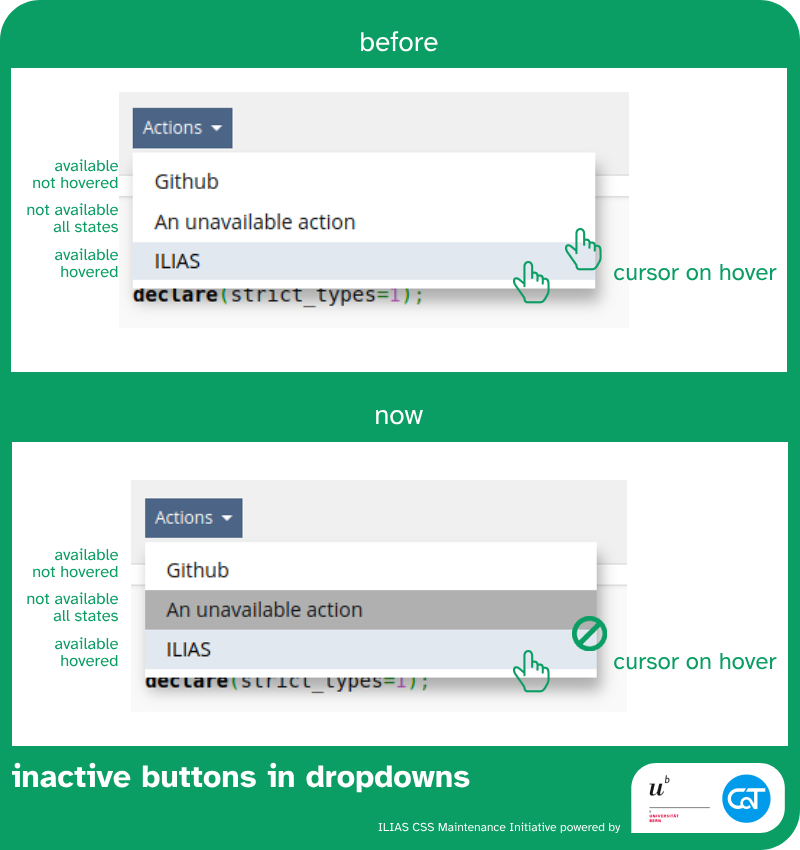
<style>
.page{position:relative;width:800px;height:850px;background:#ffffff}
.page>*{position:absolute;margin:0}
.t1{font:28px "AtkinsonHyperlegible-Regular";color:#ffffff}
.t2{font:16.6px "AtkinsonHyperlegible-Regular";color:#0a9d64}
.t3{font:24px "AtkinsonHyperlegible-Regular";color:#0a9d64}
.t4{font:32.1px "AtkinsonHyperlegible-Bold";color:#ffffff}
.t5{font:12px "AtkinsonHyperlegible-Regular";color:#ffffff}
</style>
<div class="page">
<p class="t1" style="left:361px;top:31px;width:77px;height:21px">before</p>
<p class="t2" style="left:33px;top:159px;width:85px;height:30px;text-align:right">available<br>not hovered</p>
<p class="t2" style="left:27px;top:203px;width:91px;height:30px;text-align:right">not available<br>all states</p>
<p class="t2" style="left:55px;top:248px;width:63px;height:30px;text-align:right">available<br>hovered</p>
<p class="t3" style="left:614px;top:263px;width:163px;height:18px">cursor on hover</p>
<p class="t1" style="left:376px;top:409px;width:47px;height:16px">now</p>
<p class="t2" style="left:33px;top:548px;width:85px;height:30px;text-align:right">available<br>not hovered</p>
<p class="t2" style="left:27px;top:592px;width:91px;height:30px;text-align:right">not available<br>all states</p>
<p class="t2" style="left:55px;top:637px;width:63px;height:30px;text-align:right">available<br>hovered</p>
<p class="t3" style="left:614px;top:652px;width:163px;height:18px">cursor on hover</p>
<p class="t4" style="left:11px;top:762px;width:459px;height:31px">inactive buttons in dropdowns</p>
<p class="t5" style="left:378px;top:822px;width:243px;height:11px">ILIAS CSS Maintenance Initiative powered by</p>
</div>
